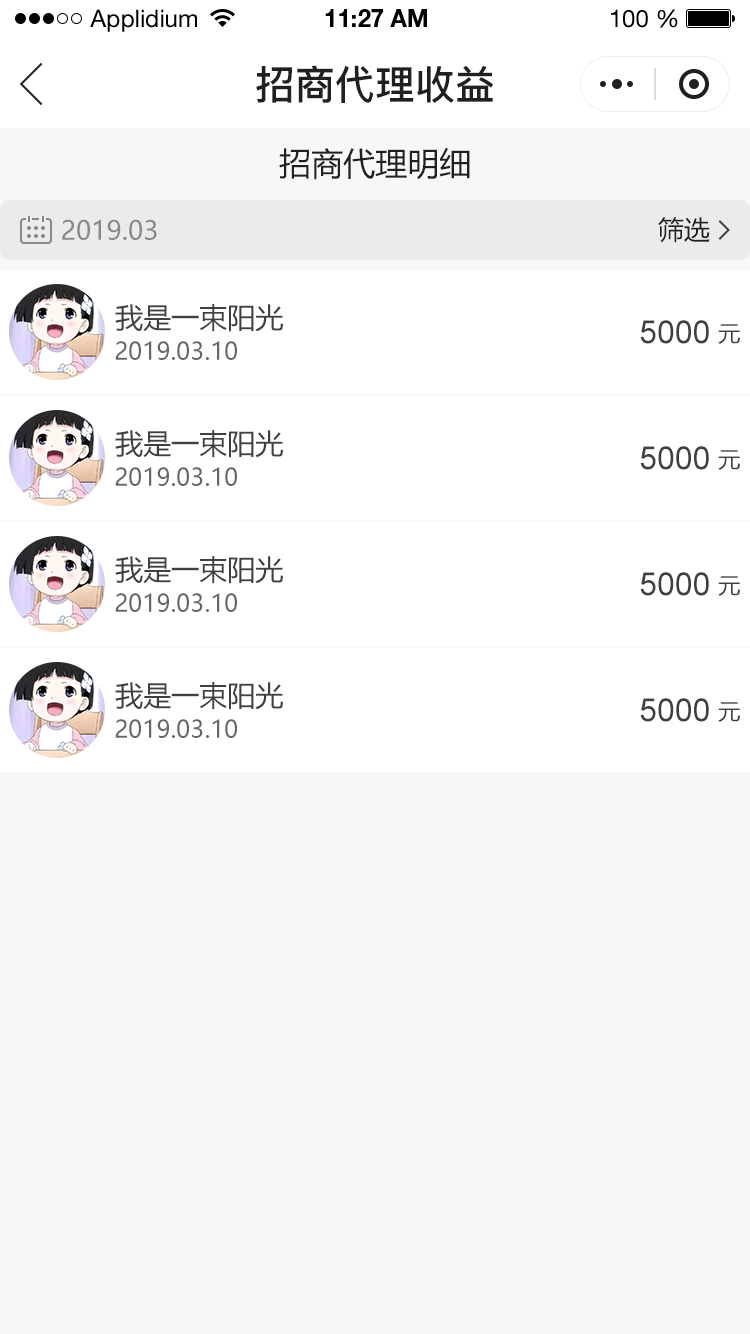
<style>
.page{position:relative;width:750px;height:1334px;background:#f7f7f7}
.page>*{position:absolute;margin:0}
.t1{font:24px "HelveticaNeueLTStd-Roman";color:#000000}
.t2{font:24px "HelveticaNeueLTStd-Bd";color:#000000}
.t3{font:40px "PingFang-SC-Bold";color:#202020;text-transform:uppercase}
.t4{font:32px "MicrosoftYaHei";color:#202020;text-transform:uppercase}
.t5{font:26px "MicrosoftYaHei";color:#888888;text-transform:uppercase}
.t6{font:26px "MicrosoftYaHei";color:#202020;text-transform:uppercase}
.t7{font:28px "MicrosoftYaHei";color:#404040;text-transform:uppercase}
.t8{font:32px "ArialMT";color:#404040;text-transform:uppercase}
.t9{font:22px "MicrosoftYaHei";color:#404040;text-transform:uppercase}
.t10{font:24px "MicrosoftYaHei";color:#666666;text-transform:uppercase}
</style>
<div class="page">
<p class="t1" style="left:90px;top:9px;width:107px;height:23px">Applidium</p>
<p class="t2" style="left:325px;top:9px;width:102px;height:18px">11:27 AM</p>
<p class="t1" style="left:611px;top:9px;width:67px;height:19px">100 %</p>
<p class="t3" style="left:256px;top:65px;width:238px;height:38px">招商代理收益</p>
<p class="t4" style="left:279px;top:147px;width:191px;height:33px">招商代理明细</p>
<p class="t5" style="left:62px;top:219px;width:95px;height:21px">2019.03</p>
<p class="t6" style="left:658px;top:217px;width:52px;height:26px">筛选</p>
<p class="t7" style="left:115px;top:304px;width:168px;height:28px">我是一束阳光</p>
<p class="t8" style="left:640px;top:320px;width:69px;height:24px">5000</p>
<p class="t9" style="left:718px;top:324px;width:22px;height:20px">元</p>
<p class="t10" style="left:115px;top:341px;width:122px;height:19px">2019.03.10</p>
<p class="t7" style="left:115px;top:430px;width:168px;height:28px">我是一束阳光</p>
<p class="t8" style="left:640px;top:446px;width:69px;height:24px">5000</p>
<p class="t9" style="left:718px;top:450px;width:22px;height:20px">元</p>
<p class="t10" style="left:115px;top:467px;width:122px;height:19px">2019.03.10</p>
<p class="t7" style="left:115px;top:556px;width:168px;height:28px">我是一束阳光</p>
<p class="t8" style="left:640px;top:572px;width:69px;height:24px">5000</p>
<p class="t9" style="left:718px;top:576px;width:22px;height:20px">元</p>
<p class="t10" style="left:115px;top:593px;width:122px;height:19px">2019.03.10</p>
<p class="t7" style="left:115px;top:682px;width:168px;height:28px">我是一束阳光</p>
<p class="t8" style="left:640px;top:698px;width:69px;height:24px">5000</p>
<p class="t9" style="left:718px;top:702px;width:22px;height:20px">元</p>
<p class="t10" style="left:115px;top:719px;width:122px;height:19px">2019.03.10</p>
</div>
